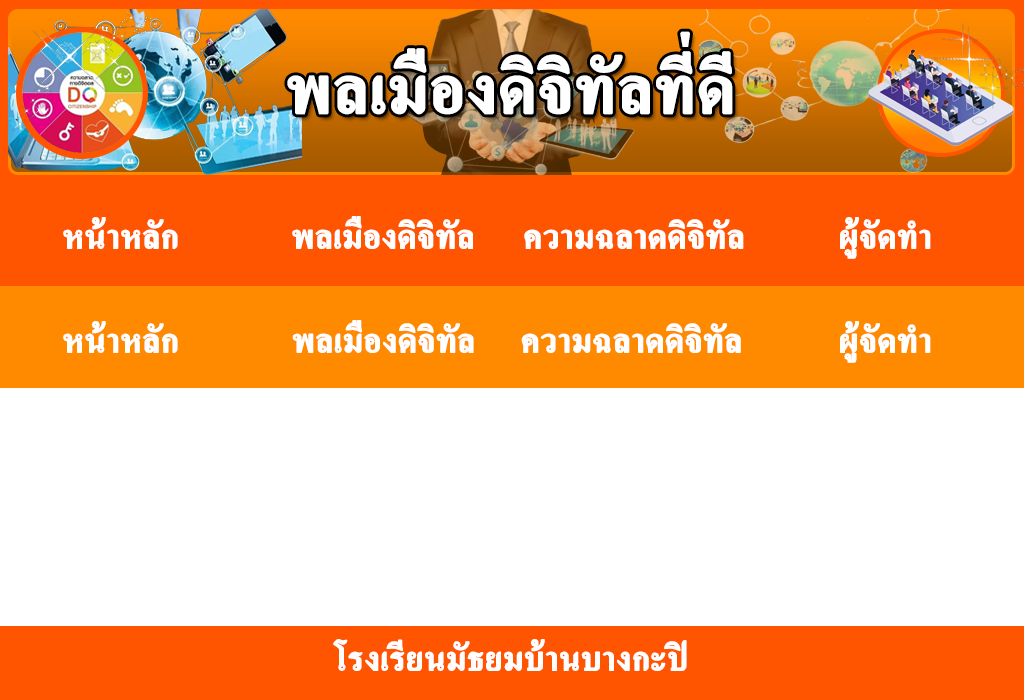
<style>
.page{position:relative;width:1024px;height:700px;background:#ffffff}
.page>*{position:absolute;margin:0}
.t1{font:90.4px "AngsanaNew-Bold";color:#ffffff;font-weight:bold}
.t2{font:45px "AngsanaNew-Bold";color:#ffffff;font-weight:bold}
</style>
<div class="page">
<p class="t1" style="left:287px;top:31px;width:446px;height:84px">พลเมืองดิจิทัลที่ดี</p>
<p class="t2" style="left:63px;top:217px;width:115px;height:32px">หน้าหลัก</p>
<p class="t2" style="left:292px;top:216px;width:181px;height:33px">พลเมืองดิจิทัล</p>
<p class="t2" style="left:524px;top:219px;width:220px;height:30px">ความฉลาดดิจิทัล</p>
<p class="t2" style="left:840px;top:217px;width:91px;height:42px">ผู้จัดทำ</p>
<p class="t2" style="left:63px;top:321px;width:115px;height:32px">หน้าหลัก</p>
<p class="t2" style="left:292px;top:320px;width:182px;height:33px">พลเมืองดิจิทัล</p>
<p class="t2" style="left:521px;top:323px;width:220px;height:30px">ความฉลาดดิจิทัล</p>
<p class="t2" style="left:840px;top:321px;width:91px;height:42px">ผู้จัดทำ</p>
<p class="t2" style="left:333px;top:639px;width:354px;height:32px">โรงเรียนมัธยมบ้านบางกะปิ</p>
</div>
